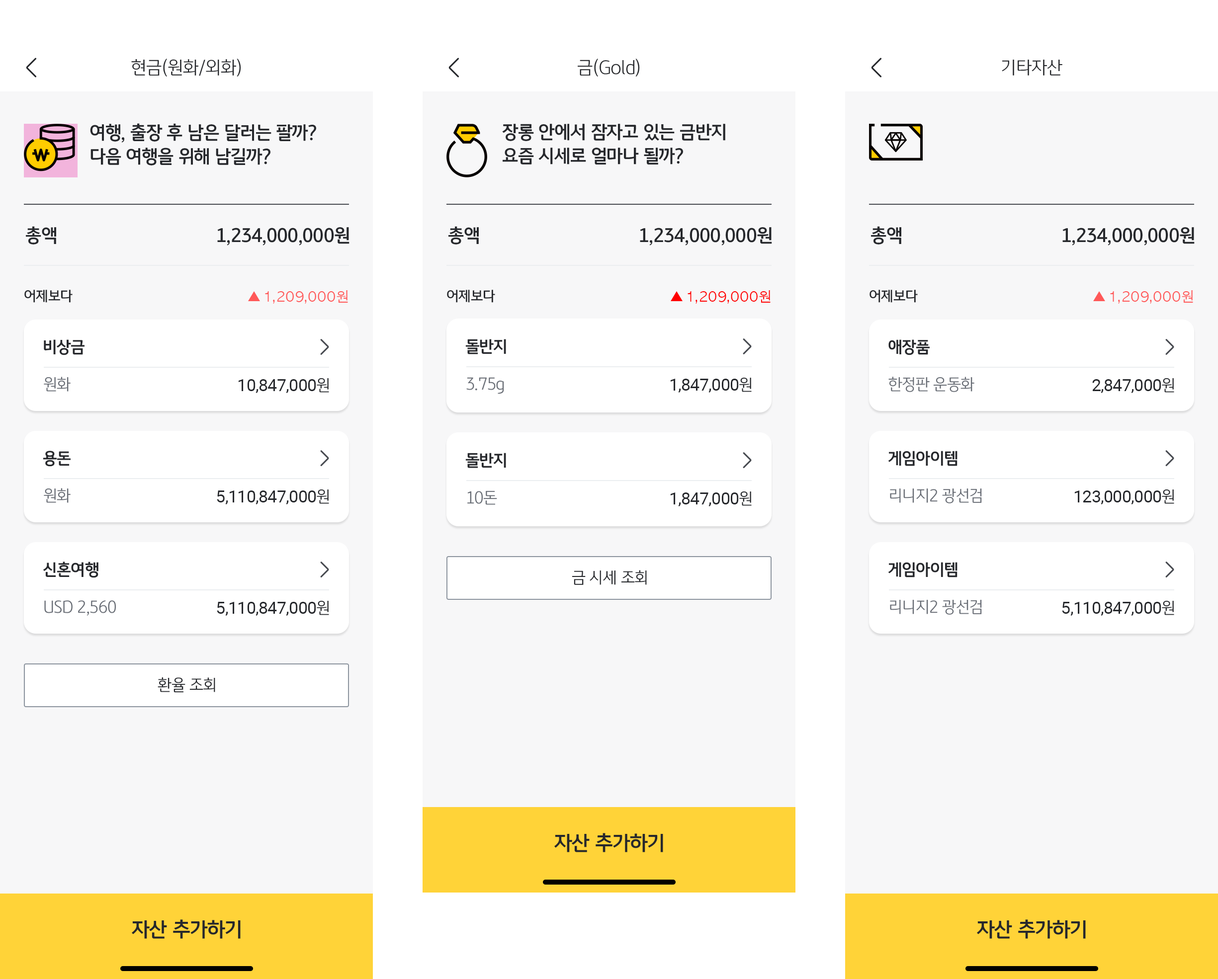
<style>
.page{position:relative;width:1218px;height:979px;background:#f7f7f8}
.page>*{position:absolute;margin:0}
.t1{font:17.9px "KBFGText-Light";letter-spacing:-0.02em;color:#26282c}
.t2{font:17.9px/23.9px "KBFGText-Bold";letter-spacing:-0.02em;color:#26282c}
.t3{font:17.9px "KBFGText-Bold";letter-spacing:-0.02em;color:#26282c}
.t4{font:13.9px "KBFGText-Medium";letter-spacing:-0.01em;color:#26282c}
.t5{font:13.9px "AppleGothic";letter-spacing:-0.01em;color:#ff5858}
.t6{font:13.9px "AppleGothic";letter-spacing:-0.01em;color:#ff0000}
.t7{font:15.9px "KBFGText-Bold";letter-spacing:-0.02em;color:#26282c}
.t8{font:15.9px "KBFGText-Light";letter-spacing:-0.02em;color:#696e76}
.t9{font:16.9px "Roboto-Regular";letter-spacing:-0.02em;color:#26282c}
.t10{font:15.9px "KBFGText-Light";letter-spacing:-0.02em;color:#26282c}
.t11{font:19.9px "KBFGText-Bold";letter-spacing:-0.02em;color:#26282c}
</style>
<div class="page">
<p class="t1" style="left:131px;top:59px;width:110px;height:18px">현금(원화/외화)</p>
<p class="t1" style="left:578px;top:59px;width:62px;height:18px">금(Gold)</p>
<p class="t1" style="left:1002px;top:60px;width:60px;height:16px">기타자산</p>
<p class="t2" style="left:90px;top:123px;width:226px;height:43px">여행, 출장 후 남은 달러는 팔까?<br>다음 여행을 위해 남길까?</p>
<p class="t2" style="left:502px;top:124px;width:223px;height:41px">장롱 안에서 잠자고 있는 금반지<br>요즘 시세로 얼마나 될까?</p>
<p class="t3" style="left:26px;top:226px;width:30px;height:19px">총액</p>
<p class="t3" style="left:217px;top:227px;width:132px;height:19px">1,234,000,000원</p>
<p class="t3" style="left:448px;top:226px;width:31px;height:19px">총액</p>
<p class="t3" style="left:640px;top:227px;width:132px;height:19px">1,234,000,000원</p>
<p class="t3" style="left:871px;top:226px;width:30px;height:19px">총액</p>
<p class="t3" style="left:1062px;top:227px;width:132px;height:19px">1,234,000,000원</p>
<p class="t4" style="left:24px;top:290px;width:49px;height:13px">어제보다</p>
<p class="t5" style="left:265px;top:290px;width:83px;height:14px">1,209,000원</p>
<p class="t4" style="left:447px;top:290px;width:48px;height:13px">어제보다</p>
<p class="t6" style="left:687px;top:290px;width:83px;height:14px">1,209,000원</p>
<p class="t4" style="left:869px;top:290px;width:49px;height:13px">어제보다</p>
<p class="t5" style="left:1110px;top:290px;width:83px;height:14px">1,209,000원</p>
<p class="t7" style="left:44px;top:339px;width:40px;height:16px">비상금</p>
<p class="t7" style="left:465px;top:339px;width:41px;height:15px">돌반지</p>
<p class="t7" style="left:888px;top:339px;width:41px;height:16px">애장품</p>
<p class="t8" style="left:44px;top:377px;width:27px;height:15px">원화</p>
<p class="t9" style="left:238px;top:378px;width:91px;height:15px">10,847,000<span class="t10">원</span></p>
<p class="t8" style="left:466px;top:377px;width:38px;height:17px">3.75g</p>
<p class="t9" style="left:670px;top:377px;width:82px;height:16px">1,847,000<span class="t10">원</span></p>
<p class="t8" style="left:888px;top:377px;width:86px;height:15px">한정판 운동화</p>
<p class="t9" style="left:1092px;top:378px;width:82px;height:15px">2,847,000<span class="t10">원</span></p>
<p class="t7" style="left:43px;top:451px;width:28px;height:16px">용돈</p>
<p class="t7" style="left:465px;top:453px;width:41px;height:15px">돌반지</p>
<p class="t7" style="left:888px;top:451px;width:69px;height:15px">게임아이템</p>
<p class="t8" style="left:44px;top:488px;width:27px;height:15px">원화</p>
<p class="t9" style="left:217px;top:489px;width:112px;height:16px">5,110,847,000<span class="t10">원</span></p>
<p class="t8" style="left:467px;top:491px;width:30px;height:14px">10돈</p>
<p class="t9" style="left:670px;top:491px;width:82px;height:15px">1,847,000<span class="t10">원</span></p>
<p class="t8" style="left:890px;top:489px;width:92px;height:15px">리니지2 광선검</p>
<p class="t9" style="left:1074px;top:489px;width:100px;height:16px">123,000,000<span class="t10">원</span></p>
<p class="t7" style="left:43px;top:562px;width:55px;height:16px">신혼여행</p>
<p class="t7" style="left:888px;top:562px;width:69px;height:16px">게임아이템</p>
<p class="t10" style="left:572px;top:570px;width:75px;height:15px">금 시세 조회</p>
<p class="t8" style="left:44px;top:600px;width:72px;height:16px">USD 2,560</p>
<p class="t9" style="left:217px;top:600px;width:112px;height:16px">5,110,847,000<span class="t10">원</span></p>
<p class="t8" style="left:890px;top:600px;width:92px;height:15px">리니지2 광선검</p>
<p class="t9" style="left:1062px;top:600px;width:112px;height:16px">5,110,847,000<span class="t10">원</span></p>
<p class="t10" style="left:158px;top:677px;width:57px;height:16px">환율 조회</p>
<p class="t11" style="left:554px;top:833px;width:109px;height:19px">자산 추가하기</p>
<p class="t11" style="left:132px;top:920px;width:109px;height:19px">자산 추가하기</p>
<p class="t11" style="left:977px;top:920px;width:109px;height:19px">자산 추가하기</p>
</div>
